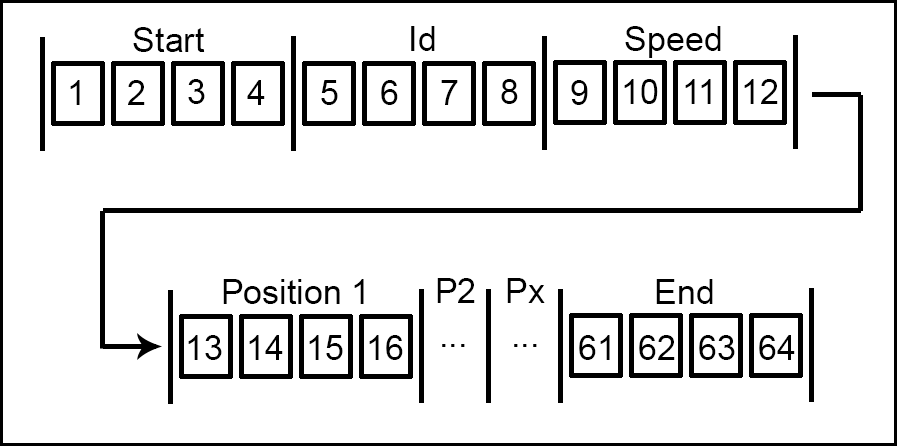
<style>
.page{position:relative;width:897px;height:446px;background:#ffffff}
.page>*{position:absolute;margin:0}
.t1{font:34px "ArialMT";color:#000000}
</style>
<div class="page">
<p class="t1" style="left:133px;top:27px;width:72px;height:25px">Start</p>
<p class="t1" style="left:411px;top:26px;width:24px;height:25px">Id</p>
<p class="t1" style="left:625px;top:26px;width:96px;height:32px">Speed</p>
<p class="t1" style="left:70px;top:80px;width:10px;height:25px">1</p>
<p class="t1" style="left:128px;top:80px;width:17px;height:25px">2</p>
<p class="t1" style="left:188px;top:79px;width:17px;height:25px">3</p>
<p class="t1" style="left:247px;top:80px;width:18px;height:25px">4</p>
<p class="t1" style="left:321px;top:80px;width:17px;height:25px">5</p>
<p class="t1" style="left:381px;top:80px;width:17px;height:25px">6</p>
<p class="t1" style="left:441px;top:80px;width:17px;height:25px">7</p>
<p class="t1" style="left:501px;top:79px;width:17px;height:25px">8</p>
<p class="t1" style="left:571px;top:80px;width:17px;height:25px">9</p>
<p class="t1" style="left:624px;top:79px;width:34px;height:25px">10</p>
<p class="t1" style="left:685px;top:79px;width:26px;height:25px">11</p>
<p class="t1" style="left:744px;top:79px;width:34px;height:25px">12</p>
<p class="t1" style="left:223px;top:279px;width:141px;height:25px">Position 1</p>
<p class="t1" style="left:437px;top:278px;width:38px;height:25px">P2</p>
<p class="t1" style="left:507px;top:278px;width:38px;height:25px">Px</p>
<p class="t1" style="left:656px;top:279px;width:57px;height:25px">End</p>
<p class="t1" style="left:188px;top:335px;width:34px;height:25px">13</p>
<p class="t1" style="left:249px;top:335px;width:34px;height:25px">14</p>
<p class="t1" style="left:309px;top:335px;width:34px;height:25px">15</p>
<p class="t1" style="left:369px;top:335px;width:34px;height:25px">16</p>
<p class="t1" style="left:579px;top:335px;width:31px;height:25px">61</p>
<p class="t1" style="left:639px;top:335px;width:36px;height:25px">62</p>
<p class="t1" style="left:699px;top:335px;width:36px;height:25px">63</p>
<p class="t1" style="left:759px;top:335px;width:36px;height:25px">64</p>
<p class="t1" style="left:442px;top:344px;width:23px;height:3px">...</p>
<p class="t1" style="left:514px;top:344px;width:23px;height:3px">...</p>
</div>
